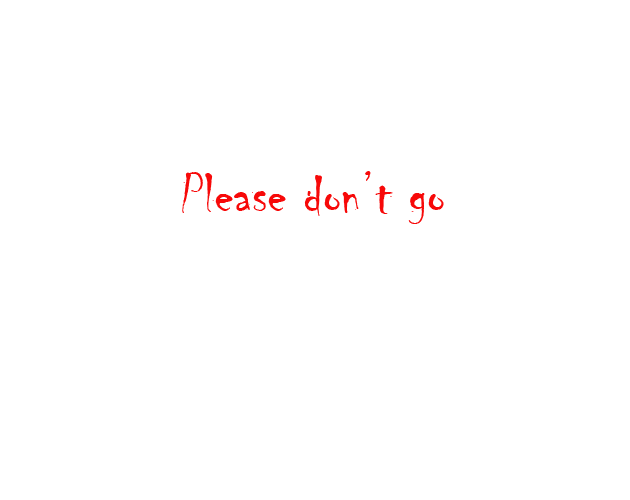
<style>
.page{position:relative;width:630px;height:500px;background:#ffffff}
.page>*{position:absolute;margin:0}
.t1{font:58.3px "Chiller-Regular";color:#f80909}
</style>
<div class="page">
<p class="t1" style="left:182px;top:171px;width:262px;height:53px">Please don’t go</p>
</div>
